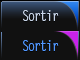
<style>
.page{position:relative;width:80px;height:60px;background:#111111}
.page>*{position:absolute;margin:0}
.t1{font:14.4px "LetterGothicStd";letter-spacing:-0.1em;color:#c8d5e9;scale:0.83 1}
.t2{font:14.4px "LetterGothicStd";letter-spacing:-0.1em;color:#5298ff;scale:0.83 1}
</style>
<div class="page">
<p class="t1" style="left:23px;top:10px;width:36px;height:11px">Sortir</p>
<p class="t2" style="left:23px;top:40px;width:36px;height:11px">Sortir</p>
</div>
